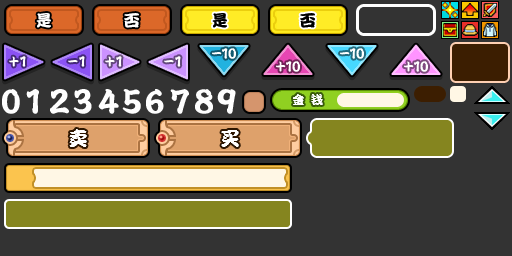
<style>
.page{position:relative;width:512px;height:256px;background:#333333}
.page>*{position:absolute;margin:0}
.t1{font:16px "DFPKanTingLiuW9";letter-spacing:-0.1em;color:#ffffff}
.t2{font:16px "DFPKanTingLiuW9";letter-spacing:-0.1em;color:#000000}
.t3{font:12px "DFPKanTingLiuW9";letter-spacing:0.1em;color:#ffffff}
.t4{font:19px "DFPKanTingLiuW9";letter-spacing:0.1em;color:#ffffff}
</style>
<div class="page">
<p class="t1" style="left:36px;top:13px;width:15px;height:15px">是</p>
<p class="t1" style="left:124px;top:13px;width:15px;height:15px">否</p>
<p class="t2" style="left:212px;top:13px;width:15px;height:15px">是</p>
<p class="t2" style="left:300px;top:13px;width:15px;height:15px">否</p>
<p class="t3" style="left:293px;top:94px;width:30px;height:11px">金 钱</p>
<p class="t4" style="left:69px;top:129px;width:18px;height:18px">卖</p>
<p class="t4" style="left:221px;top:130px;width:18px;height:17px">买</p>
</div>
